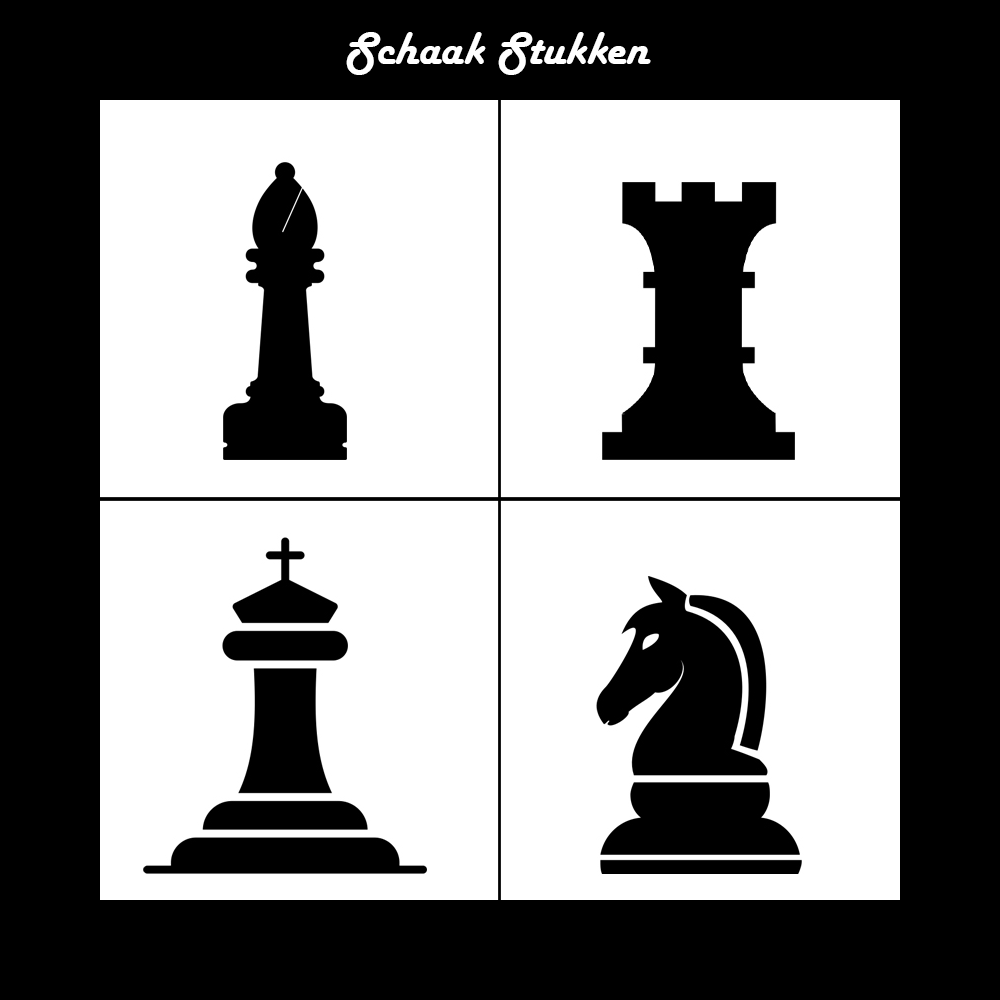
<style>
.page{position:relative;width:1000px;height:1000px;background:#ffffff}
.page>*{position:absolute;margin:0}
.t1{font:48px "HarlowSolid";color:#ffffff}
</style>
<div class="page">
<p class="t1" style="left:346px;top:32px;width:305px;height:43px">Schaak Stukken</p>
</div>
